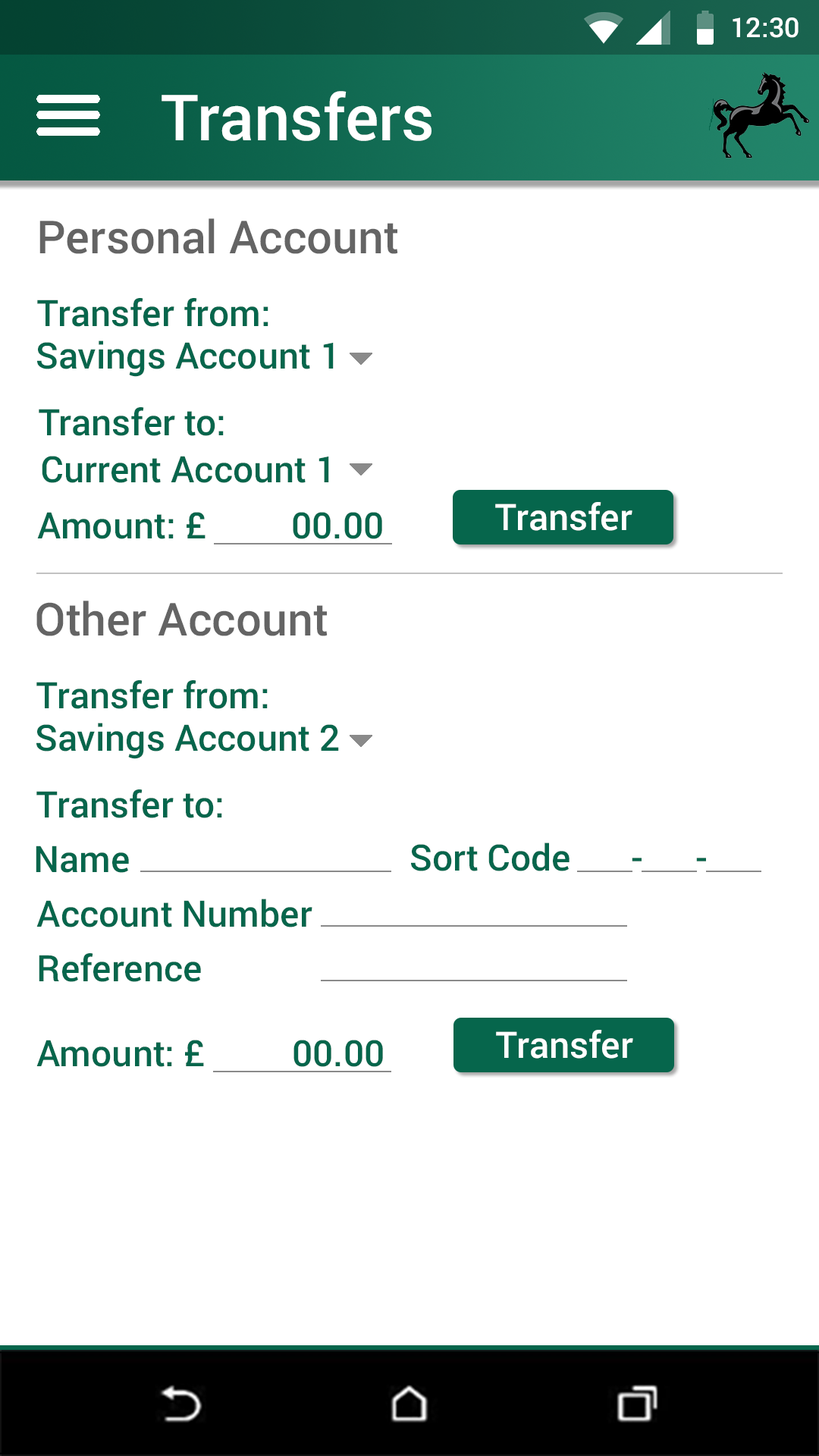
<style>
.page{position:relative;width:819px;height:1456px;background:#ffffff}
.page>*{position:absolute;margin:0}
.t1{font:27.3px "Roboto-Medium";color:#ffffff}
.t2{font:63.7px "Roboto-Medium";color:#ffffff}
.t3{font:45.5px "Roboto-Medium";color:#646464}
.t4{font:36.4px "Roboto-Medium";color:#06664c}
.t5{font:36.4px "Roboto-Medium";color:#ffffff}
</style>
<div class="page">
<p class="t1" style="left:733px;top:17px;width:66px;height:21px">12:30</p>
<p class="t2" style="left:162px;top:91px;width:269px;height:50px">Transfers</p>
<p class="t3" style="left:39px;top:218px;width:359px;height:36px">Personal Account</p>
<p class="t4" style="left:37px;top:298px;width:231px;height:29px">Transfer from:</p>
<p class="t4" style="left:37px;top:340px;width:297px;height:37px">Savings Account 1</p>
<p class="t4" style="left:39px;top:407px;width:185px;height:29px">Transfer to:</p>
<p class="t4" style="left:42px;top:456px;width:287px;height:27px">Current Account 1</p>
<p class="t5" style="left:495px;top:502px;width:137px;height:29px">Transfer</p>
<p class="t4" style="left:37px;top:512px;width:169px;height:27px">Amount: £</p>
<p class="t4" style="left:293px;top:512px;width:89px;height:27px">00.00</p>
<p class="t3" style="left:36px;top:601px;width:292px;height:35px">Other Account</p>
<p class="t4" style="left:36px;top:680px;width:232px;height:29px">Transfer from:</p>
<p class="t4" style="left:36px;top:723px;width:303px;height:36px">Savings Account 2</p>
<p class="t4" style="left:36px;top:789px;width:186px;height:29px">Transfer to:</p>
<p class="t4" style="left:36px;top:846px;width:93px;height:27px">Name</p>
<p class="t4" style="left:411px;top:842px;width:159px;height:29px">Sort Code</p>
<p class="t4" style="left:632px;top:858px;width:10px;height:3px">-</p>
<p class="t4" style="left:696px;top:858px;width:10px;height:3px">-</p>
<p class="t4" style="left:36px;top:899px;width:276px;height:28px">Account Number</p>
<p class="t4" style="left:39px;top:953px;width:162px;height:29px">Reference</p>
<p class="t5" style="left:496px;top:1030px;width:137px;height:29px">Transfer</p>
<p class="t4" style="left:36px;top:1040px;width:168px;height:27px">Amount: £</p>
<p class="t4" style="left:293px;top:1040px;width:90px;height:27px">00.00</p>
</div>
